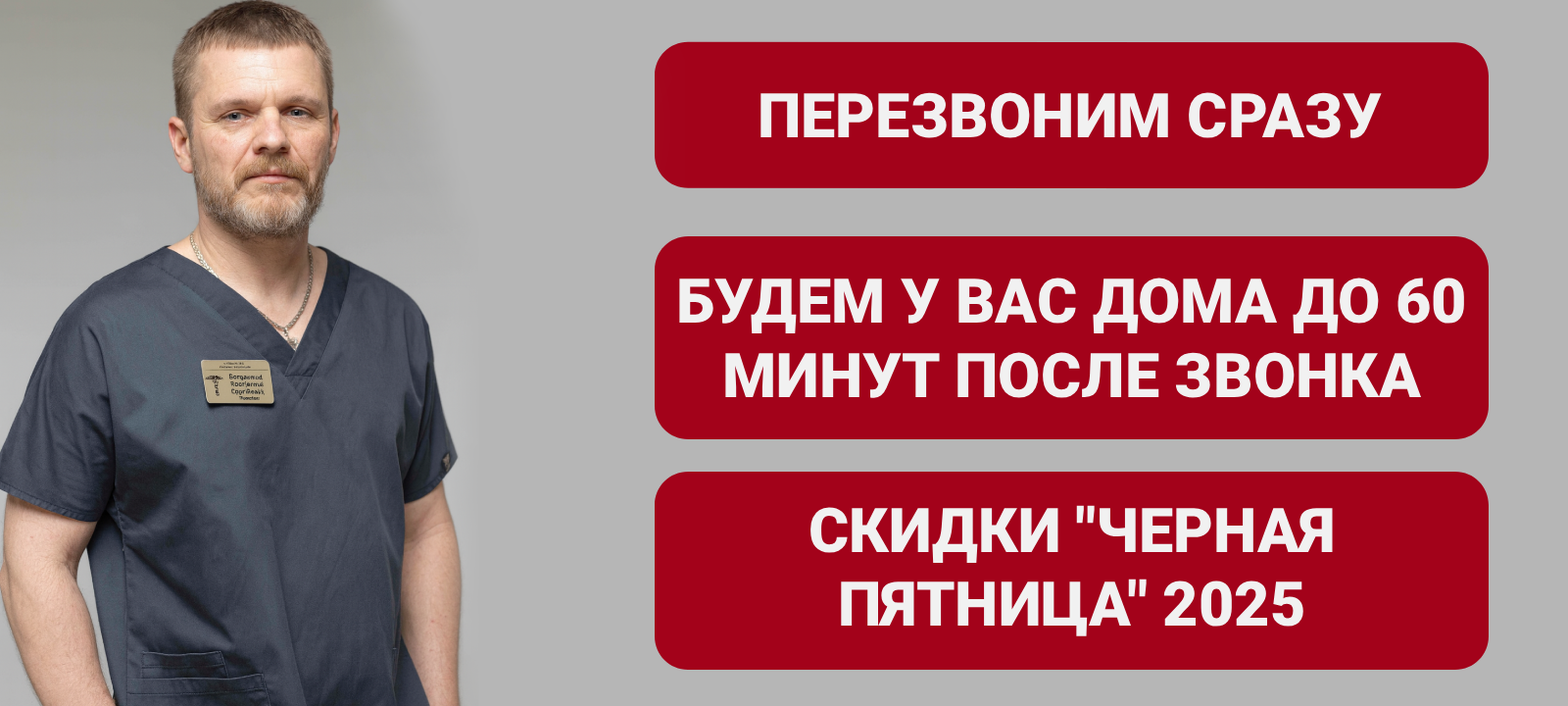
<style>
.page{position:relative;width:1568px;height:706px;background:#a3021a}
.page>*{position:absolute;margin:0}
.t1{font:61.7px "Roboto-Black";color:#f1f1f1}
</style>
<div class="page">
<p class="t1" style="left:760px;top:92px;width:622px;height:46px">ПЕРЕЗВОНИМ СРАЗУ</p>
<p class="t1" style="left:679px;top:277px;width:785px;height:121px;text-align:center">БУДЕМ У ВАС ДОМА ДО 60 МИНУТ ПОСЛЕ ЗВОНКА</p>
<p class="t1" style="left:810px;top:505px;width:523px;height:131px;text-align:center">СКИДКИ "ЧЕРНАЯ ПЯТНИЦА" 2025</p>
</div>
